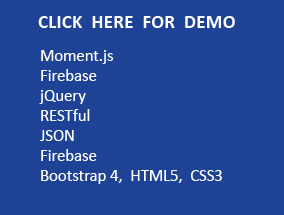
<style>
.page{position:relative;width:284px;height:215px;background:#1e4296}
.page>*{position:absolute;margin:0}
.t1{font:16.7px "Calibri";color:#ffffff}
</style>
<div class="page">
<p class="t1" style="left:39px;top:50px;width:183px;height:134px">Moment.js<br>Firebase<br>jQuery<br>RESTful<br>JSON<br>Firebase<br>Bootstrap 4,  HTML5,  CSS3</p>
</div>
